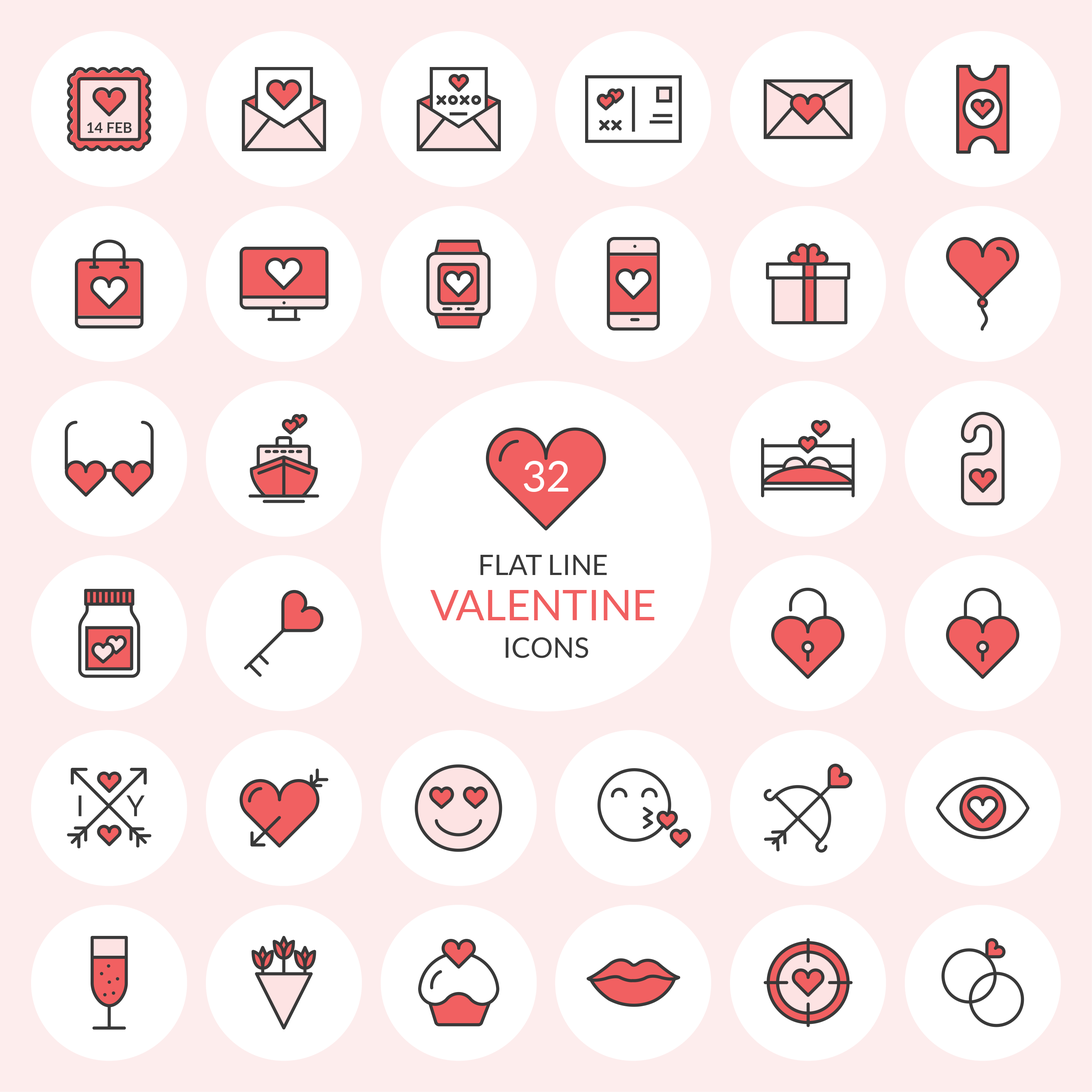
<style>
.page{position:relative;width:1092px;height:1092px;background:#ffffff}
.page>*{position:absolute;margin:0}
.t1{font:42.1px "Lato-Regular";color:#ffffff}
.t2{font:28.1px/45.2px "Lato-Regular";color:#393939}
.t3{font:42.1px/45.2px "Lato-Regular";color:#f16061}
.t4{font:28.1px/37.4px "Lato-Regular";color:#393939}
</style>
<div class="page">
<p class="t1" style="left:524px;top:461px;width:44px;height:31px">32</p>
<p class="t2" style="left:430px;top:555px;width:224px;height:103px;text-align:center">FLAT LINE <br><span class="t3">VALENTINE <br></span><span class="t4">ICONS</span></p>
</div>
